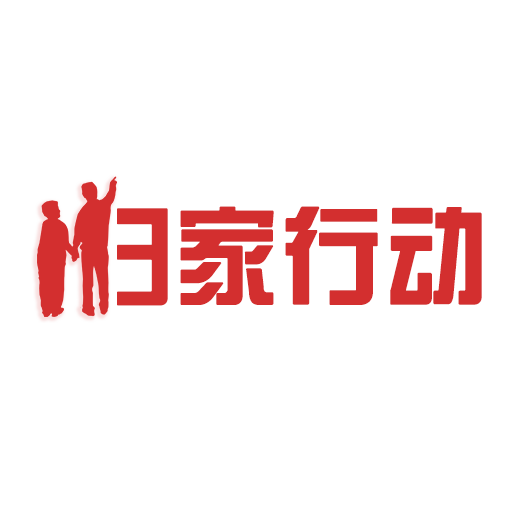
<style>
.page{position:relative;width:512px;height:512px;background:#ffffff}
.page>*{position:absolute;margin:0}
.t1{font:102px "HGZY_CNKI";color:#d32f2f;font-weight:bold}
</style>
<div class="page">
<p class="t1" style="left:77px;top:206px;width:405px;height:100px">归家行动</p>
</div>
